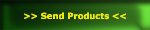
<style>
.page{position:relative;width:150px;height:30px}
.page>*{position:absolute;margin:0}
.t1{font:8.6px "Verdana-Bold";color:#f1e90c}
</style>
<div class="page">
<p class="t1" style="left:24px;top:12px;width:102px;height:8px">&gt;&gt; Send Products &lt;&lt;</p>
</div>
